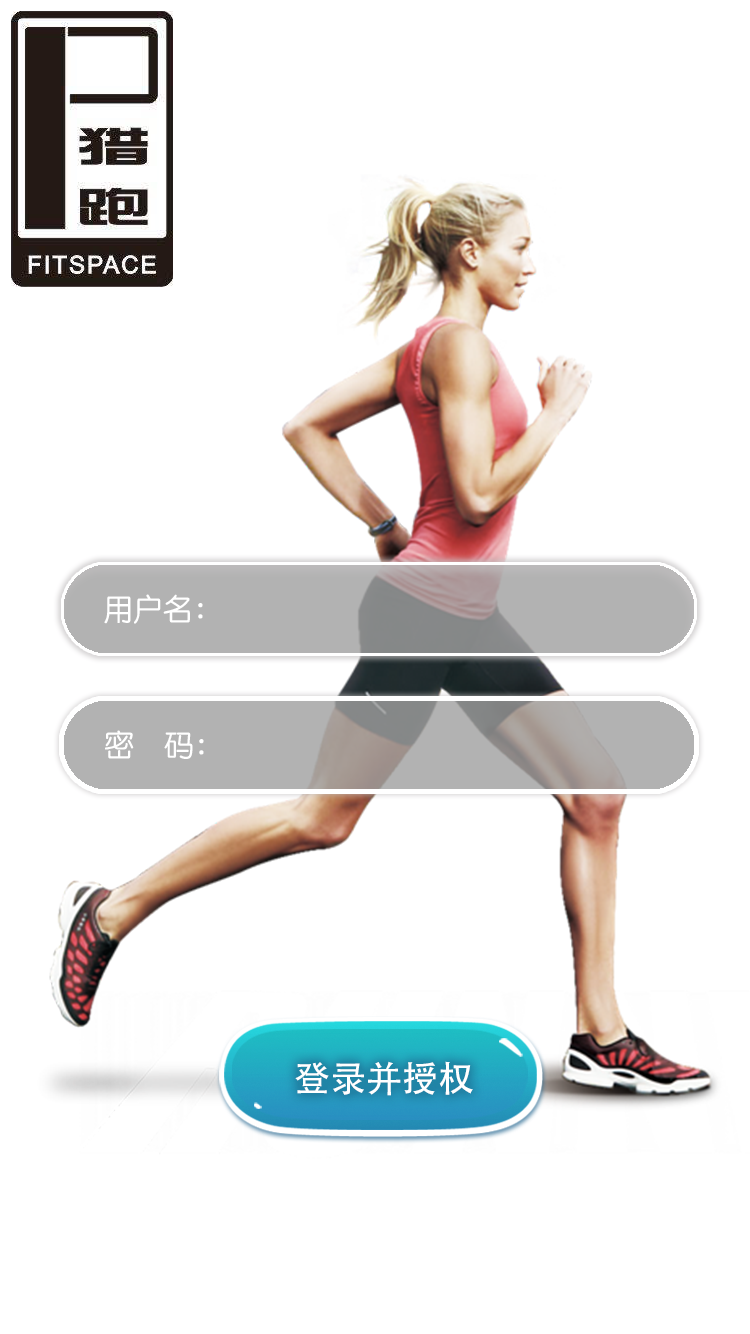
<style>
.page{position:relative;width:750px;height:1334px;background:#ffffff}
.page>*{position:absolute;margin:0}
.t1{font:30px "STYuanti-SC-Regular";color:#ffffff}
.t2{font:36px "AdobeHeitiStd-Regular";color:#ffffff}
</style>
<div class="page">
<p class="t1" style="left:104px;top:594px;width:99px;height:30px">用户名：</p>
<p class="t1" style="left:105px;top:730px;width:99px;height:29px">密    码：</p>
<p class="t2" style="left:295px;top:1061px;width:178px;height:35px">登录并授权</p>
</div>
